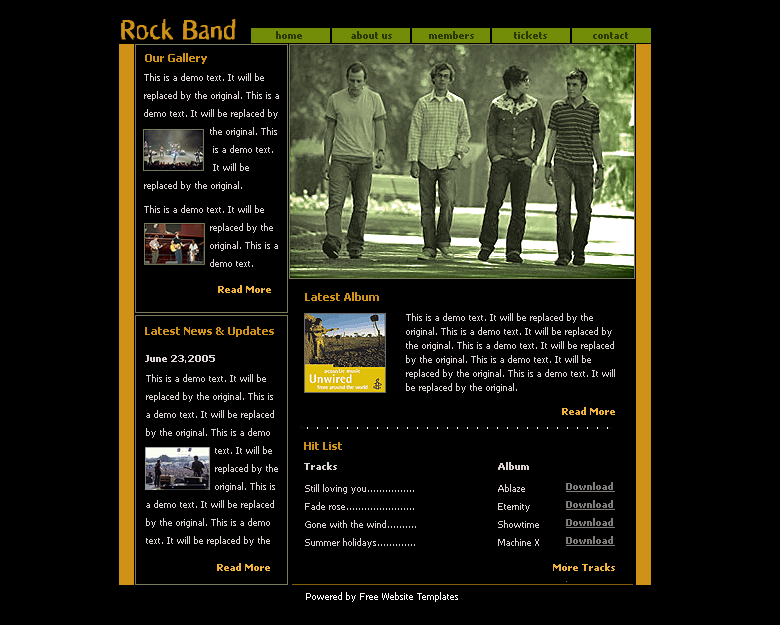
<style>
.page{position:relative;width:780px;height:625px;background:#000000}
.page>*{position:absolute;margin:0}
.t1{font:30px "Scarecrow";color:#cf9118;font-weight:bold}
.t2{font:10px "Tahoma-Bold";color:#2e3901}
.t3{font:11px "Tahoma-Bold";color:#cf9118}
.t4{font:9px/18px "Tahoma";color:#ddd4d4}
.t5{font:9px "Tahoma-Bold";color:#f0b33c}
.t6{font:9px/14px "Tahoma";color:#ddd4d4}
.t7{font:9px "Tahoma-Bold";color:#ddd4d4}
.t8{font:9px/16px "Tahoma";color:#ddd4d4}
.t9{font:9px/18px "Tahoma-Bold";color:#7f7c79;text-decoration:underline}
.t10{font:9px "Tahoma";color:#ffffff}
</style>
<div class="page">
<p class="t1" style="left:121px;top:19px;width:115px;height:21px">Rock Band</p>
<p class="t2" style="left:276px;top:31px;width:352px;height:8px">home                about us            members             tickets               contact</p>
<p class="t3" style="left:145px;top:53px;width:62px;height:11px">Our Gallery</p>
<p class="t4" style="left:144px;top:73px;width:135px;height:118px">This is a demo text. It will be replaced by the original. This is a demo text. It will be replaced by<br>                      the original. This<br>                       is a demo text.                                                 <br>                       It will be replaced by the original.</p>
<p class="t4" style="left:144px;top:205px;width:134px;height:62px">This is a demo text. It will be<br>                      replaced by the         <br>                      original. This is a<br>                      demo text.</p>
<p class="t5" style="left:218px;top:285px;width:53px;height:8px">Read More</p>
<p class="t3" style="left:305px;top:292px;width:74px;height:9px">Latest Album</p>
<p class="t6" style="left:406px;top:313px;width:209px;height:80px">This is a demo text. It will be replaced by the original. This is a demo text. It will be replaced by the original. This is a demo text. It will be replaced by the original. This is a demo text. It will be replaced by the original. This is a demo text. It will be replaced by the original.</p>
<p class="t3" style="left:145px;top:326px;width:129px;height:11px">Latest News &amp; Updates</p>
<p class="t7" style="left:145px;top:355px;width:70px;height:8px">June 23,2005</p>
<p class="t4" style="left:146px;top:374px;width:132px;height:172px"><span class="t8">T</span>his is a demo text. It will be replaced by the original. This is a demo text. It will be replaced by the original. This is a demo<br>                       text. It will be<br>                       replaced by the<br>                       original. This is <br>a demo text. It will be replaced by the original. This is a demo text. It will be replaced by the original.</p>
<p class="t5" style="left:562px;top:407px;width:53px;height:8px">Read More</p>
<p class="t3" style="left:304px;top:442px;width:38px;height:8px">Hit List</p>
<p class="t7" style="left:304px;top:462px;width:33px;height:8px">Tracks</p>
<p class="t7" style="left:498px;top:462px;width:31px;height:8px">Album</p>
<p class="t4" style="left:305px;top:484px;width:111px;height:64px">Still loving you................<br>Fade rose.......................<br>Gone with the wind..........<br>Summer holidays.............</p>
<p class="t4" style="left:498px;top:484px;width:41px;height:62px">Ablaze<br>Eternity<br>Showtime<br>Machine X</p>
<p class="t9" style="left:566px;top:482px;width:49px;height:100px">Download<br>Download<br>Download<br>Download</p>
<p class="t5" style="left:217px;top:563px;width:53px;height:8px">Read More</p>
<p class="t5" style="left:553px;top:563px;width:62px;height:8px">More Tracks</p>
<p class="t10" style="left:306px;top:592px;width:152px;height:10px">Powered by Free Website Templates</p>
</div>
